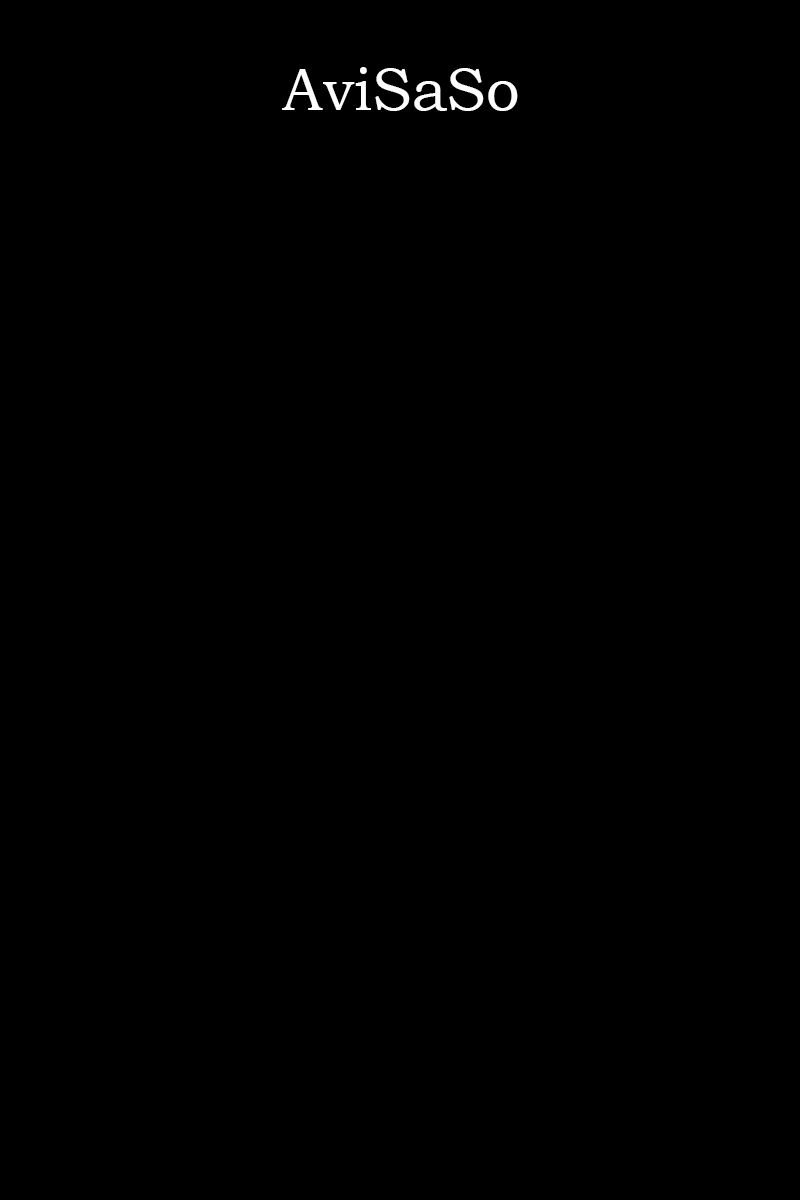
<style>
.page{position:relative;width:800px;height:1200px;background:#000000}
.page>*{position:absolute;margin:0}
.t1{font:60px "BookmanOldStyle";color:#fefefe}
</style>
<div class="page">
<p class="t1" style="left:282px;top:67px;width:236px;height:44px">AviSaSo</p>
</div>
